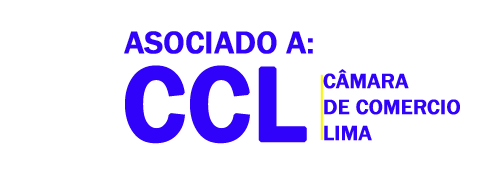
<style>
.page{position:relative;width:500px;height:179px;background:#ffffff}
.page>*{position:absolute;margin:0}
.t1{font:32.2px "FranklinGothic-Medium";color:#3103f9;font-weight:bold}
.t2{font:107.4px "FranklinGothic-Medium";color:#3103f9;font-weight:bold}
.t3{font:21.5px "FranklinGothic-Medium";color:#3103f9;font-weight:bold}
</style>
<div class="page">
<p class="t1" style="left:124px;top:31px;width:189px;height:23px">ASOCIADO A:</p>
<p class="t2" style="left:125px;top:65px;width:182px;height:79px">CCL</p>
<p class="t3" style="left:323px;top:69px;width:137px;height:72px">CÂMARA<br>DE COMERCIO<br>LIMA</p>
</div>
